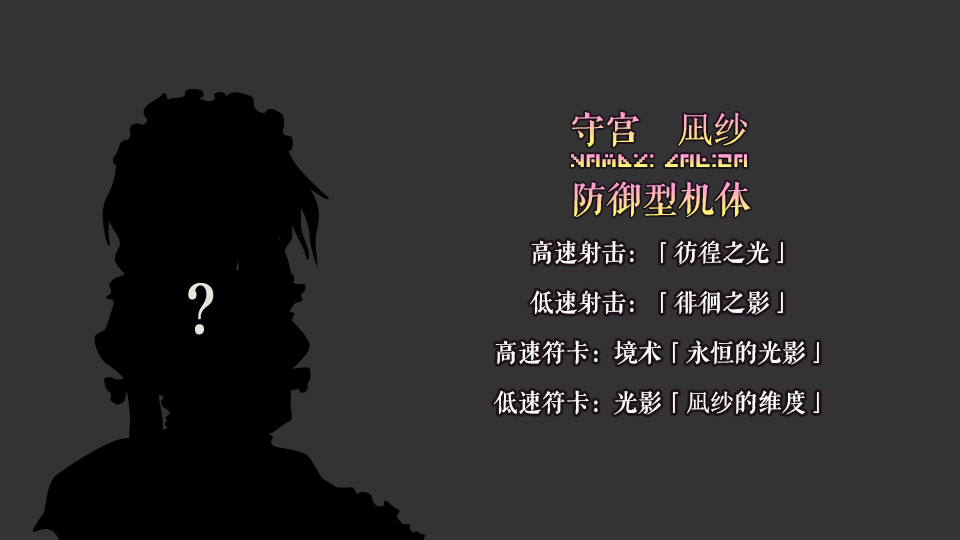
<style>
.page{position:relative;width:960px;height:540px;background:#333333}
.page>*{position:absolute;margin:0}
.t1{font:36px "FZQKBYSJW--GB1-0"}
.t2{font:36px "SimSun"}
.t3{font:18px "Undefined"}
.t4{font:24px "FZQKBYSJW--GB1-0";color:#ffffff}
.t5{font:24px "SimSun";color:#ffffff}
</style>
<div class="page">
<p class="t1" style="left:572px;top:111px;width:175px;height:36px">守宫　<span class="t2">凪纱</span></p>
<p class="t3" style="left:571px;top:154px;width:176px;height:13px">Yamori   Nagisa</p>
<p class="t1" style="left:574px;top:181px;width:177px;height:36px">防御型机体</p>
<p class="t4" style="left:531px;top:240px;width:252px;height:25px">高速射击：「彷徨之光」</p>
<p class="t4" style="left:530px;top:290px;width:253px;height:25px">低速射击：「徘徊之影」</p>
<p class="t4" style="left:495px;top:340px;width:324px;height:25px">高速符卡：境术「永恒的光影」</p>
<p class="t4" style="left:494px;top:390px;width:325px;height:25px">低速符卡：光影「<span class="t5">凪纱</span>的维度」</p>
</div>
